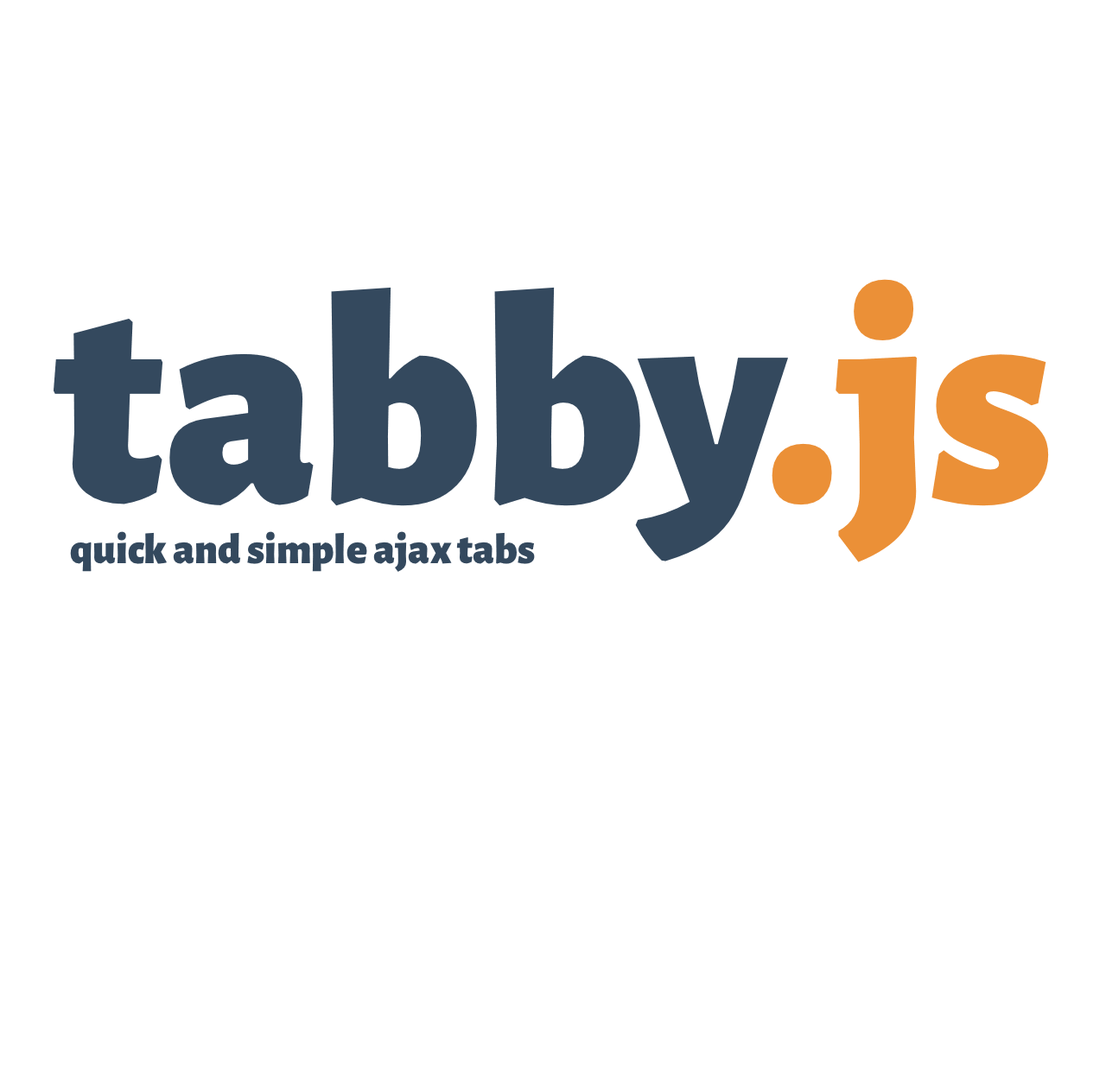
<style>
.page{position:relative;width:1106px;height:1078px;background:#ffffff}
.page>*{position:absolute;margin:0}
.t1{font:305.4px "AlegreyaSans-Black";color:#34495e}
.t2{font:305.4px "AlegreyaSans-Black";color:#eb9037}
.t3{font:43.2px "AlegreyaSans-Black";color:#34495e}
</style>
<div class="page">
<p class="t1" style="left:54px;top:279px;width:995px;height:283px">tabby<span class="t2">.js</span></p>
<p class="t3" style="left:70px;top:531px;width:465px;height:41px">quick and simple ajax tabs</p>
</div>
